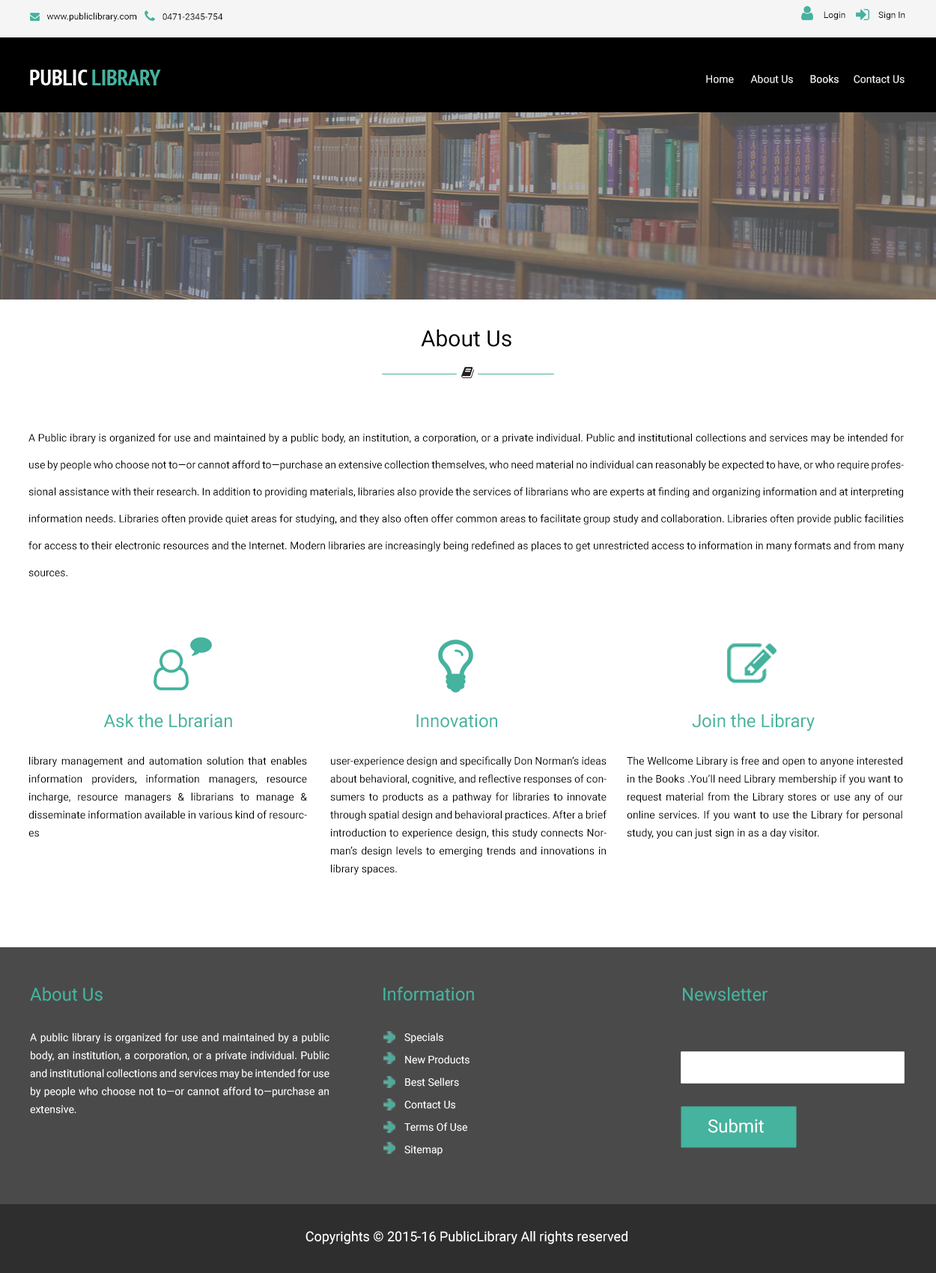
<style>
.page{position:relative;width:936px;height:1273px;background:#ffffff}
.page>*{position:absolute;margin:0}
.t1{font:9px "Roboto-Regular";color:#000000}
.t2{font:10.5px "Roboto-Regular";color:#f2f2f2}
.t3{font:10.5px "Roboto-Regular";color:#eeeeee}
.t4{font:10.5px "Roboto-Regular";color:#fefefe}
.t5{font:10.5px "Roboto-Regular";color:#f1f1f1}
.t6{font:22.5px "Roboto-Regular";color:#000000}
.t7{font:10.5px/27px "Roboto-Regular";color:#000000}
.t8{font:18px "Roboto-Regular";color:#45b39e}
.t9{font:10.5px/18px "Roboto-Regular";color:#000000}
.t10{font:10.5px/22.5px "Roboto-Regular";color:#ffffff}
.t11{font:18px/18px "Roboto-Regular";color:#45b39e}
.t12{font:10.5px/18px "Roboto-Regular";color:#ffffff}
.t13{font:18px "Roboto-Regular";color:#ffffff}
.t14{font:13.5px "Roboto-Regular";color:#ffffff}
</style>
<div class="page">
<p class="t1" style="left:46px;top:12px;width:91px;height:10px">www.publiclibrary.com</p>
<p class="t1" style="left:163px;top:13px;width:60px;height:7px">0471-2345-754</p>
<p class="t1" style="left:824px;top:11px;width:22px;height:9px">Login</p>
<p class="t1" style="left:879px;top:11px;width:27px;height:9px">Sign In</p>
<p class="t2" style="left:706px;top:75px;width:28px;height:8px">Home</p>
<p class="t3" style="left:751px;top:75px;width:42px;height:8px">About Us</p>
<p class="t4" style="left:811px;top:75px;width:28px;height:8px">Books</p>
<p class="t5" style="left:854px;top:75px;width:51px;height:8px">Contact Us</p>
<p class="t6" style="left:421px;top:330px;width:91px;height:17px">About Us</p>
<p class="t7" style="left:28px;top:433px;width:876px;height:144px;text-align:justify">A Public ibrary is organized for use and maintained by a public body, an institution, a corporation, or a private individual. Public and institutional collections and services may be intended for use by people who choose not to—or cannot afford to—purchase an extensive collection themselves, who need material no individual can reasonably be expected to have, or who require professional assistance with their research. In addition to providing materials, libraries also provide the services of librarians who are experts at finding and organizing information and at interpreting information needs. Libraries often provide quiet areas for studying, and they also often offer common areas to facilitate group study and collaboration. Libraries often provide public facilities for access to their electronic resources and the Internet. Modern libraries are increasingly being redefined as places to get unrestricted access to information in many formats and from many sources.</p>
<p class="t8" style="left:103px;top:714px;width:129px;height:14px">Ask the Lbrarian</p>
<p class="t8" style="left:416px;top:714px;width:81px;height:14px">Innovation</p>
<p class="t8" style="left:692px;top:714px;width:123px;height:17px">Join the Library</p>
<p class="t9" style="left:28px;top:757px;width:279px;height:80px;text-align:justify">library management and automation solution that enables information providers, information managers, resource incharge, resource managers &amp; librarians to manage &amp; disseminate information available in various kind of resources</p>
<p class="t9" style="left:330px;top:757px;width:277px;height:118px;text-align:justify">user-experience design and specifically Don Norman’s ideas about behavioral, cognitive, and reflective responses of consumers to products as a pathway for libraries to innovate through spatial design and behavioral practices. After a brief introduction to experience design, this study connects Norman’s design levels to emerging trends and innovations in library spaces.</p>
<p class="t9" style="left:627px;top:757px;width:276px;height:82px;text-align:justify">The Wellcome Library is free and open to anyone interested in the Books .You’ll need Library membership if you want to request material from the Library stores or use any of our online services. If you want to use the Library for personal study, you can just sign in as a day visitor.</p>
<p class="t8" style="left:30px;top:987px;width:73px;height:15px">About Us</p>
<p class="t10" style="left:384px;top:987px;width:90px;height:169px;text-align:justify"><span class="t11">Information<br><br></span>Specials<br>New Products<br>Best Sellers<br>Contact Us<br>Terms Of Use<br>Sitemap</p>
<p class="t8" style="left:683px;top:987px;width:85px;height:15px">Newsletter</p>
<p class="t12" style="left:30px;top:1033px;width:300px;height:81px;text-align:justify">A public library is organized for use and maintained by a public body, an institution, a corporation, or a private individual. Public and institutional collections and services may be intended for use by people who choose not to—or cannot afford to—purchase an extensive.</p>
<p class="t13" style="left:709px;top:1119px;width:55px;height:14px">Submit</p>
<p class="t14" style="left:306px;top:1232px;width:322px;height:13px">Copyrights © 2015-16 PublicLibrary All rights reserved</p>
</div>
